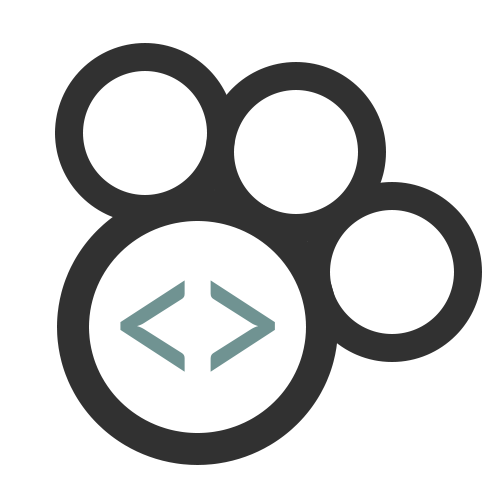
<style>
.page{position:relative;width:500px;height:500px;background:#ffffff}
.page>*{position:absolute;margin:0}
.t1{font:208px "Lato-Regular";letter-spacing:-0.075em;color:#709392;scale:0.8 1}
</style>
<div class="page">
<p class="t1" style="left:120px;top:280px;width:155px;height:92px">&lt;&gt;</p>
</div>
